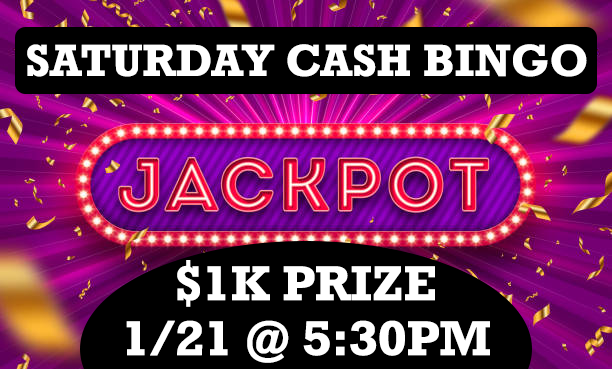
<style>
.page{position:relative;width:612px;height:369px;background:#000000}
.page>*{position:absolute;margin:0}
.t1{font:45.8px "Rockwell-Bold";color:#ffffff}
</style>
<div class="page">
<p class="t1" style="left:27px;top:44px;width:560px;height:33px">SATURDAY CASH BINGO</p>
<p class="t1" style="left:126px;top:260px;width:364px;height:103px;text-align:center">$1K PRIZE<br>1/21 @ 5:30PM</p>
</div>
